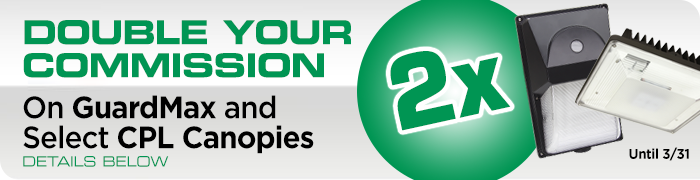
<style>
.page{position:relative;width:700px;height:180px}
.page>*{position:absolute;margin:0}
.t1{font:33.1px/33px "Eurostile-BoldExtendedTwo";letter-spacing:-0.03em;color:#009553;text-transform:uppercase;scale:0.95 1}
.t2{font:31.1px/41px "Gotham-Medium";letter-spacing:-0.03em;color:#000000;scale:0.95 1}
.t3{font:31.1px/41px "Gotham-Bold";letter-spacing:-0.03em;color:#000000;scale:0.95 1}
.t4{font:31.1px/30.1px "Gotham-Medium";letter-spacing:-0.03em;color:#000000;scale:0.95 1}
.t5{font:31.1px/30.1px "Gotham-Bold";letter-spacing:-0.03em;color:#000000;scale:0.95 1}
.t6{font:14.1px/18.1px "Eurostile-ExtendedTwo";letter-spacing:-0.03em;color:#009553;scale:0.95 1}
.t7{font:96.9px "Eurostile-Bold";letter-spacing:-0.01em;color:#009553;scale:0.95 1}
.t8{font:14.1px "Gotham-Bold";letter-spacing:-0.03em;color:#000000;scale:0.95 1}
</style>
<div class="page">
<p class="t1" style="left:23px;top:20px;width:328px;height:147px">Double Your<br>Commission<br><span class="t2">On </span><span class="t3">GuardMax </span><span class="t2">and<br></span><span class="t4">Select </span><span class="t5">CPL Canopies<br></span><span class="t6">DETAILS BELOW</span></p>
<p class="t7" style="left:390px;top:51px;width:121px;height:80px;rotate:-12deg">2x</p>
<p class="t8" style="left:629px;top:147px;width:60px;height:14px">Until 3/31</p>
</div>
